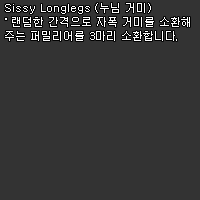
<style>
.page{position:relative;width:200px;height:200px;background:#333333}
.page>*{position:absolute;margin:0}
.t1{font:11px/14px "Dotum";color:#ffffff}
</style>
<div class="page">
<p class="t1" style="left:5px;top:3px;width:185px;height:38px">Sissy Longlegs (누님 거미)<br>˚ 랜덤한 간격으로 자폭 거미를 소환해<br>주는 퍼밀리어를 3마리 소환합니다.</p>
</div>
